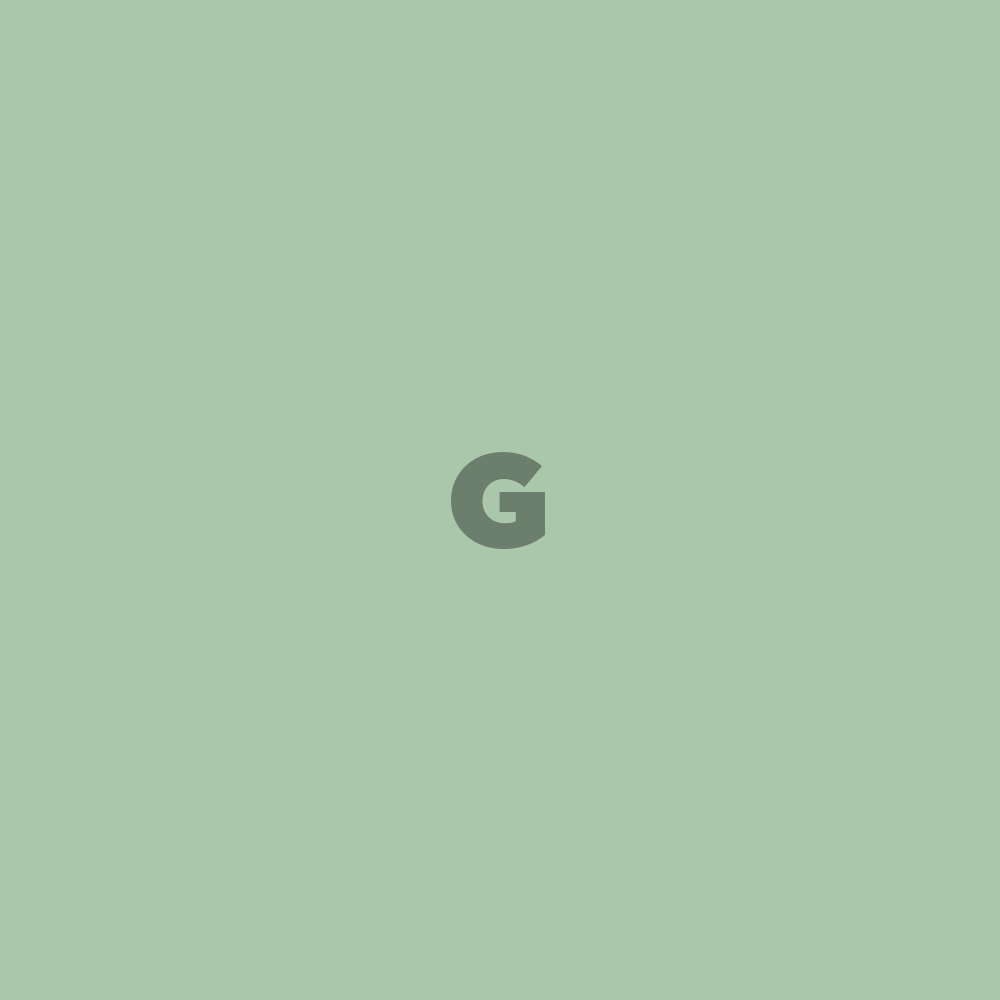
<style>
.page{position:relative;width:1000px;height:1000px;background:#abc7ab}
.page>*{position:absolute;margin:0}
.t1{font:133.2px "Gotham-Ultra";letter-spacing:0.52em;color:#6c7e6c}
</style>
<div class="page">
<p class="t1" style="left:451px;top:452px;width:94px;height:97px">G</p>
</div>
